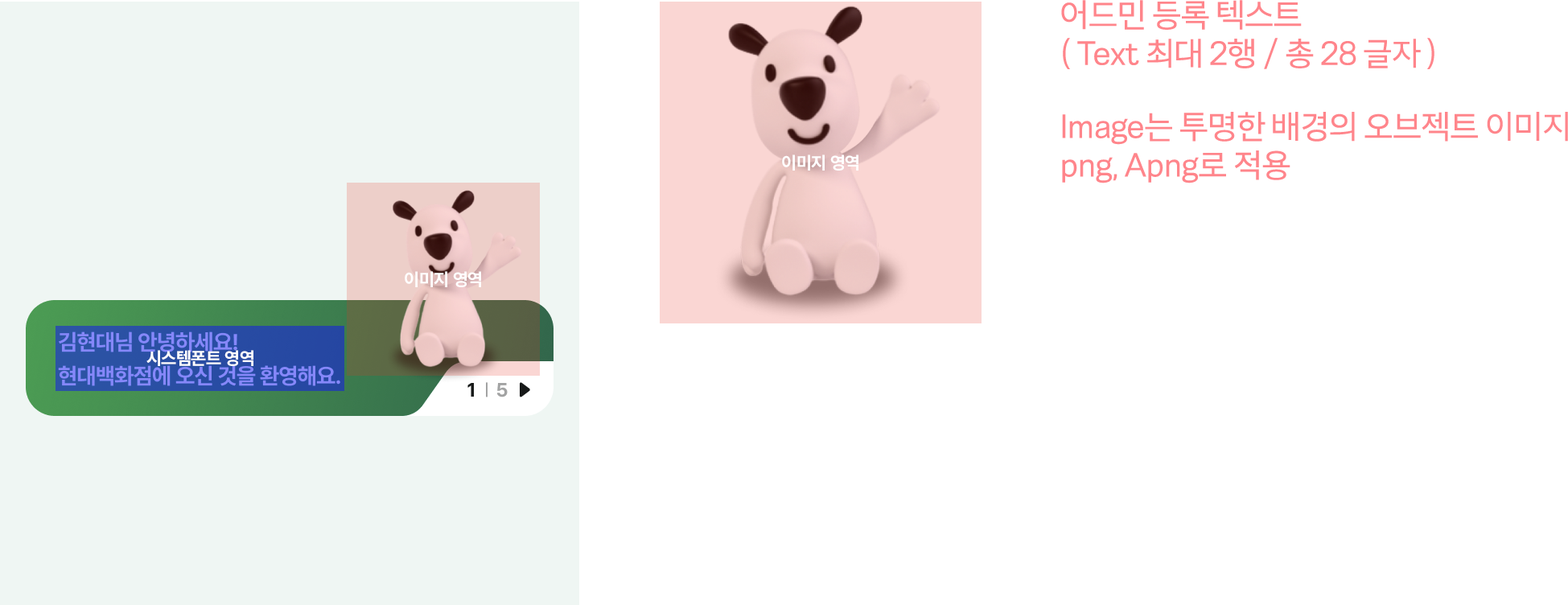
<style>
.page{position:relative;width:1568px;height:605px;background:#ffffff}
.page>*{position:absolute;margin:0}
.t1{font:32.2px/38.6px "Happiness-Sans-Regular";letter-spacing:-0.03em;color:#ff858b}
.t2{font:17.7px "Pretendard-Bold";letter-spacing:-0.02em;color:#ffffff}
</style>
<div class="page">
<p class="t1" style="left:1061px;top:0px;width:373px;height:69px">어드민 등록 텍스트<br>( Text 최대 2행 / 총 28 글자 )</p>
<p class="t1" style="left:1062px;top:112px;width:506px;height:71px">Image는 투명한 배경의 오브젝트 이미지 <br>png, Apng로 적용</p>
<p class="t2" style="left:782px;top:154px;width:76px;height:17px">이미지 영역</p>
<p class="t2" style="left:405px;top:271px;width:76px;height:16px">이미지 영역</p>
<p class="t2" style="left:146px;top:350px;width:107px;height:16px">시스템폰트 영역</p>
</div>
